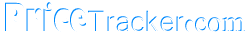
<style>
.page{position:relative;width:251px;height:36px;background:#ffffff}
.page>*{position:absolute;margin:0}
.t1{font:38px "Microsoft-Yi-Baiti";color:#ffffff}
.t2{font:38px "GillSans-UltraBoldCondensed";color:#ffffff}
.t3{font:38px "Kokila";color:#ffffff}
</style>
<div class="page">
<p class="t1" style="left:5px;top:2px;width:240px;height:30px"><span class="t2">Price</span>Tracker<span class="t2">.</span><span class="t3">com</span></p>
</div>
